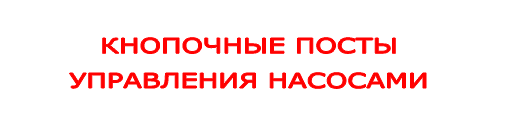
<style>
.page{position:relative;width:512px;height:128px;background:#ffffff}
.page>*{position:absolute;margin:0}
.t1{font:35px/34.9px "Verdana";color:#ff0000;scale:1.34 1}
</style>
<div class="page">
<p class="t1" style="left:69px;top:37px;width:357px;height:52px;text-align:center">КНОПОЧНЫЕ ПОСТЫ<br>УПРАВЛЕНИЯ НАСОСАМИ</p>
</div>
